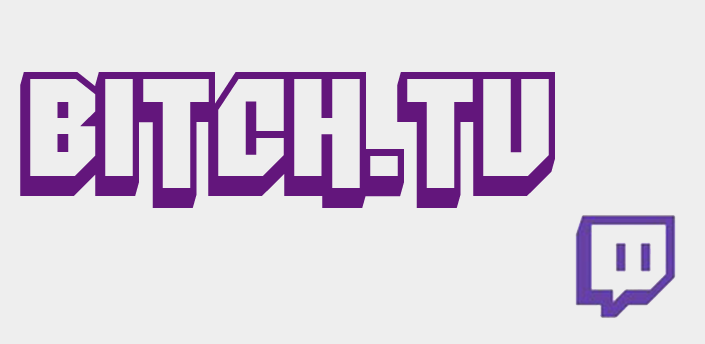
<style>
.page{position:relative;width:705px;height:344px;background:#eeeeee}
.page>*{position:absolute;margin:0}
.t1{font:140px "DimitriSwank";color:#63167c}
</style>
<div class="page">
<p class="t1" style="left:20px;top:72px;width:535px;height:136px">BITCH.TV</p>
</div>
